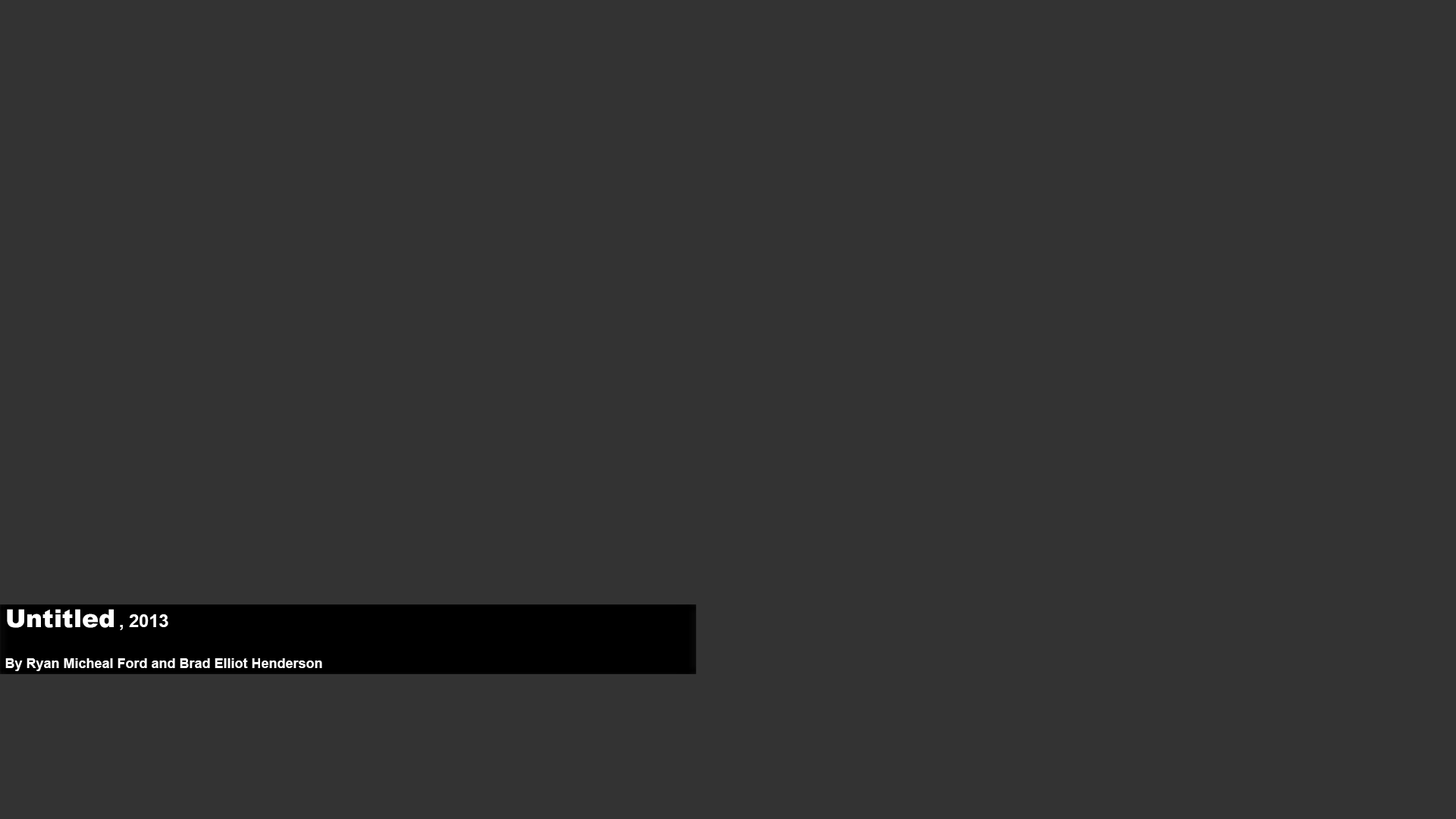
<style>
.page{position:relative;width:1456px;height:819px;background:#333333}
.page>*{position:absolute;margin:0}
.t1{font:24.7px "Arial-Black";color:#ffffff}
.t2{font:17.7px "Arial-BoldMT";color:#ffffff}
.t3{font:13.7px "Arial-BoldMT";color:#ffffff}
</style>
<div class="page">
<p class="t1" style="left:7px;top:609px;width:107px;height:19px">Untitled</p>
<p class="t2" style="left:120px;top:614px;width:48px;height:16px">, 2013</p>
<p class="t3" style="left:5px;top:658px;width:317px;height:13px">By Ryan Micheal Ford and Brad Elliot Henderson</p>
</div>
